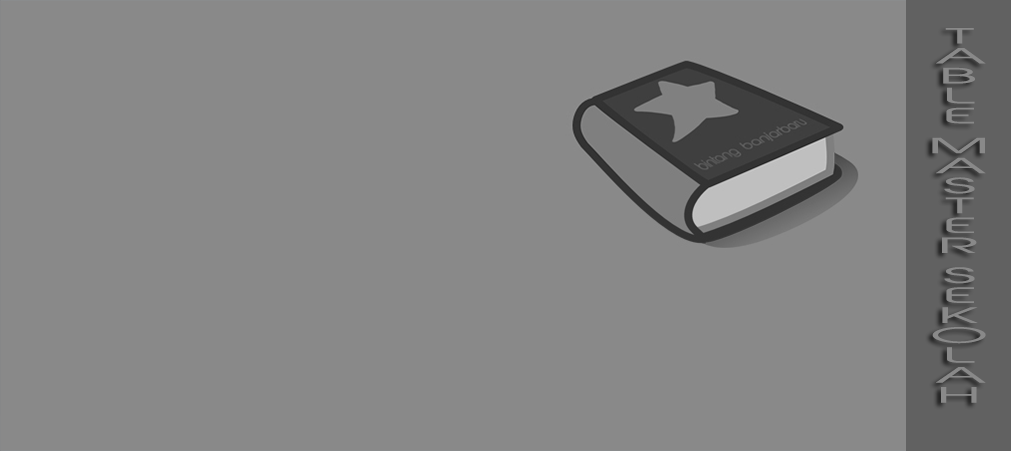
<style>
.page{position:relative;width:1011px;height:451px;background:#898989}
.page>*{position:absolute;margin:0}
.t1{font:20px "AbeatbyKai";color:#898989;scale:3.26 1}
</style>
<div class="page">
<p class="t1" style="left:932px;top:28px;width:54px;height:375px">TABLE MASTER SEKOLAH</p>
</div>
